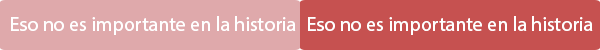
<style>
.page{position:relative;width:600px;height:50px;background:#dfa9ab}
.page>*{position:absolute;margin:0}
.t1{font:20px "MyriadHebrew-Regular";color:#ffffff}
</style>
<div class="page">
<p class="t1" style="left:11px;top:16px;width:285px;height:19px">Eso no es importante en la historia</p>
<p class="t1" style="left:308px;top:16px;width:285px;height:19px">Eso no es importante en la historia</p>
</div>
